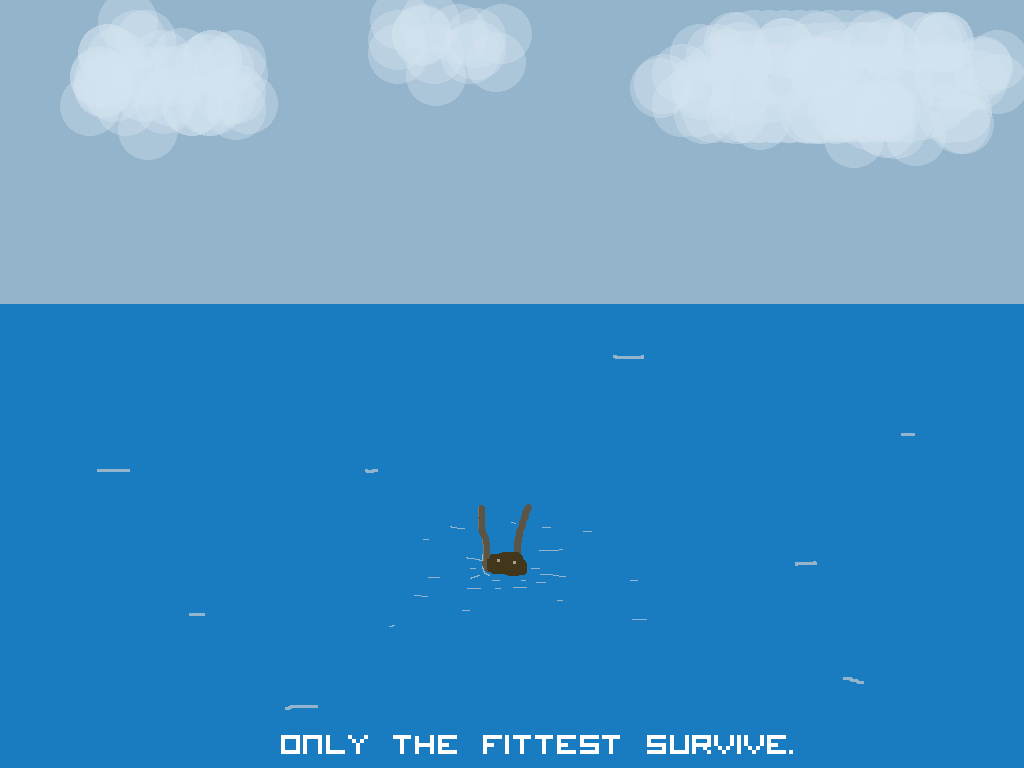
<style>
.page{position:relative;width:1024px;height:768px;background:#197bc0}
.page>*{position:absolute;margin:0}
.t1{font:48px "VisitorTT2BRK";color:#ffffff}
</style>
<div class="page">
<p class="t1" style="left:281px;top:735px;width:512px;height:19px">Only the fittest survive.</p>
</div>
